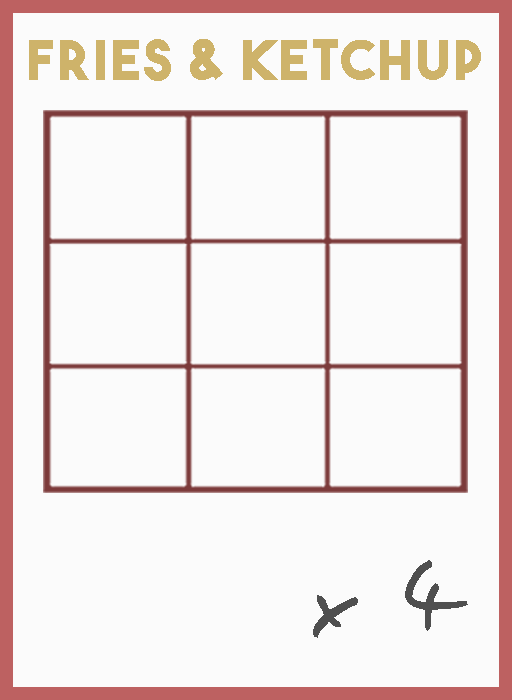
<style>
.page{position:relative;width:512px;height:700px;background:#fbfbfb}
.page>*{position:absolute;margin:0}
.t1{font:54.5px "TheBoldFont";letter-spacing:0.05em;color:#ceb36a}
.t2{font:106.1px "EasySpeech";letter-spacing:0.05em;color:#4f4f4f}
</style>
<div class="page">
<p class="t1" style="left:29px;top:39px;width:452px;height:42px">fries &amp; Ketchup</p>
<p class="t2" style="left:313px;top:560px;width:155px;height:78px">x 4</p>
</div>
